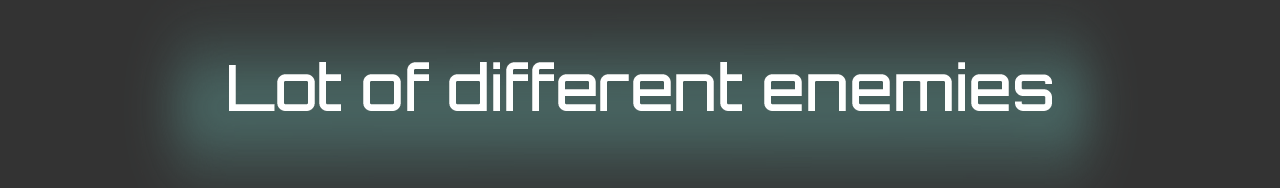
<style>
.page{position:relative;width:1280px;height:188px;background:#333333}
.page>*{position:absolute;margin:0}
.t1{font:63.2px "Orbitron-Medium";color:#ffffff}
</style>
<div class="page">
<p class="t1" style="left:229px;top:62px;width:823px;height:49px">Lot of different enemies</p>
</div>
